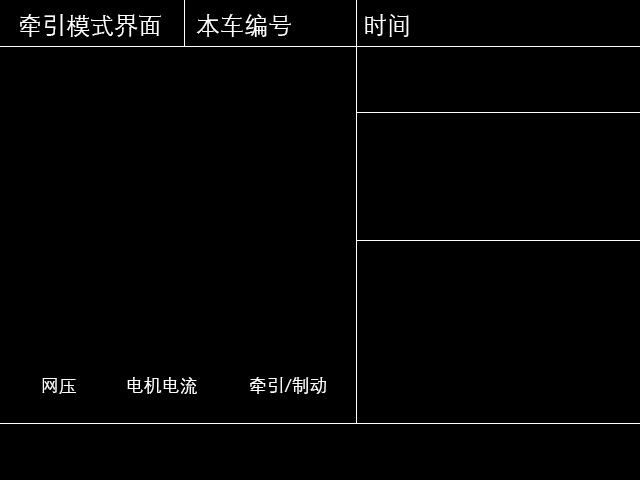
<style>
.page{position:relative;width:640px;height:480px;background:#000000}
.page>*{position:absolute;margin:0}
.t1{font:24px "DengXian";color:#ffffff}
.t2{font:18px "DengXian";color:#ffffff}
</style>
<div class="page">
<p class="t1" style="left:20px;top:14px;width:141px;height:23px">牵引模式界面</p>
<p class="t1" style="left:196px;top:14px;width:95px;height:23px">本车编号</p>
<p class="t1" style="left:365px;top:14px;width:44px;height:23px">时间</p>
<p class="t2" style="left:127px;top:377px;width:70px;height:17px">电机电流</p>
<p class="t2" style="left:250px;top:377px;width:76px;height:17px">牵引/制动</p>
<p class="t2" style="left:42px;top:378px;width:34px;height:16px">网压</p>
</div>
